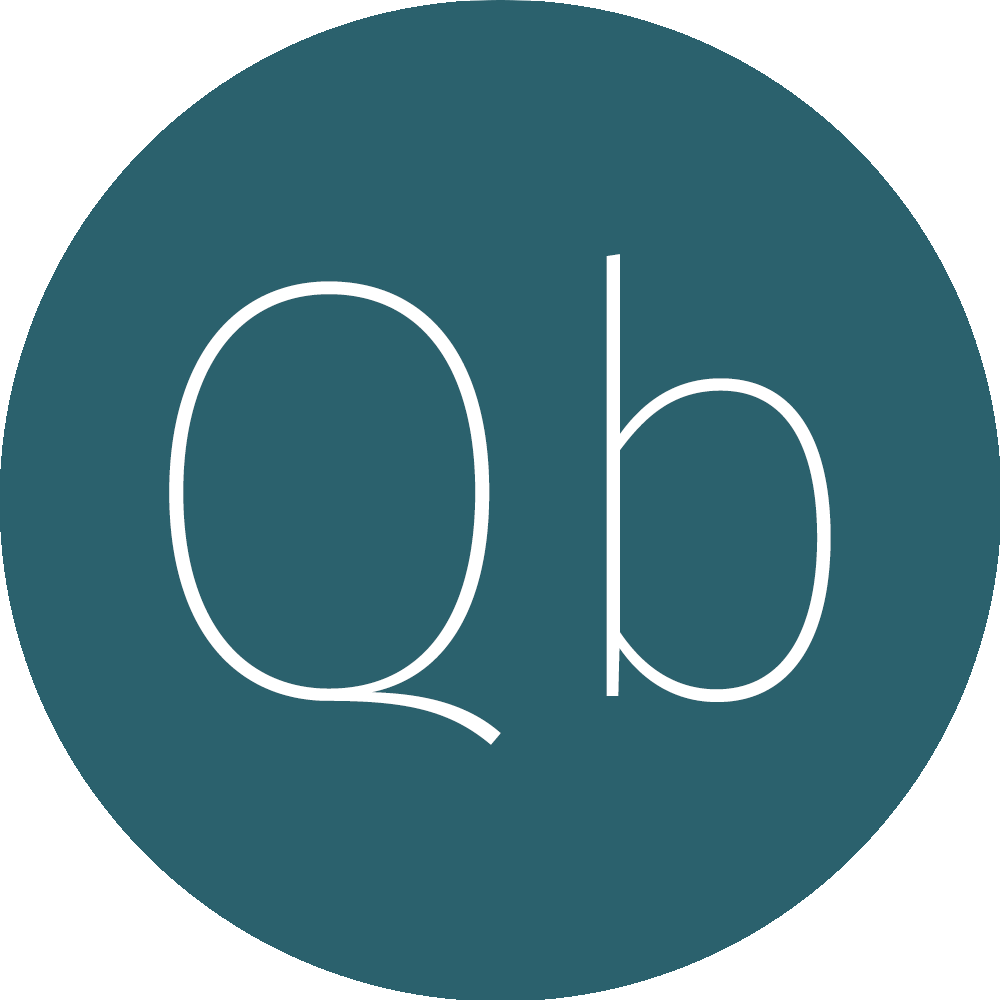
<style>
.page{position:relative;width:1000px;height:1000px;background:#2b616d}
.page>*{position:absolute;margin:0}
.t1{font:600px "FiraSans-Thin";color:#ffffff}
</style>
<div class="page">
<p class="t1" style="left:169px;top:254px;width:662px;height:491px">Qb</p>
</div>
